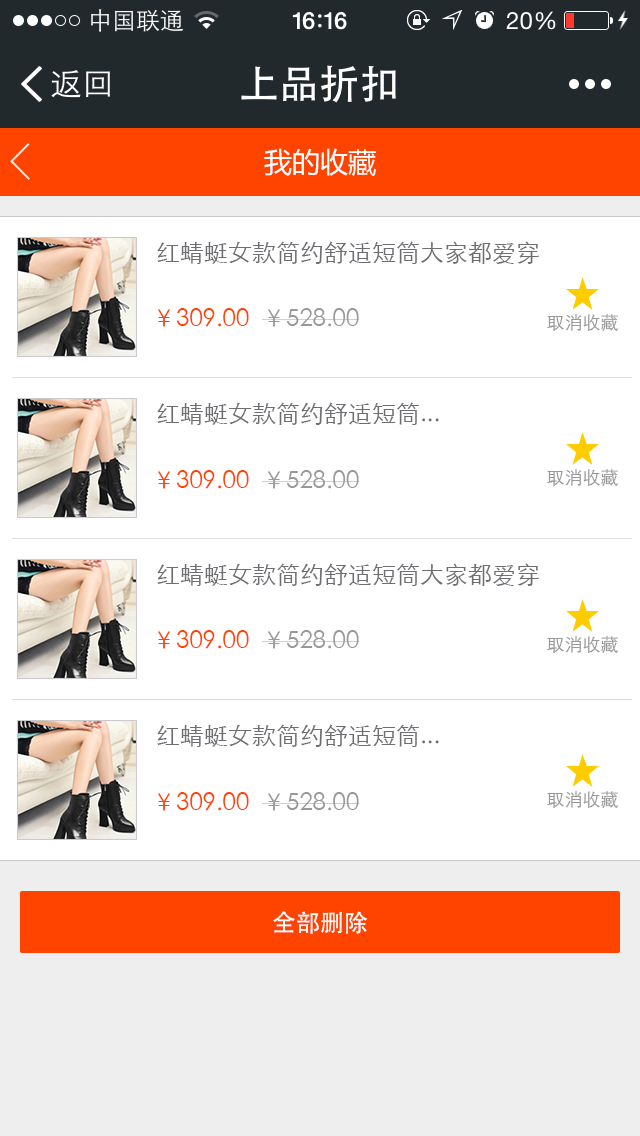
<style>
.page{position:relative;width:640px;height:1136px;background:#ffffff}
.page>*{position:absolute;margin:0}
.t1{font:28px "MicrosoftYaHei";color:#ffffff}
.t2{font:24px "STXihei";color:#6d6d72}
.t3{font:24px "STXihei";color:#ff4400}
.t4{font:24px "STXihei";color:#999999}
.t5{font:18px "STXihei";color:#999999}
.t6{font:24px "STHeiti";color:#ffffff}
</style>
<div class="page">
<p class="t1" style="left:264px;top:148px;width:112px;height:28px">我的收藏</p>
<p class="t2" style="left:157px;top:241px;width:382px;height:23px">红蜻蜓女款简约舒适短筒大家都爱穿</p>
<p class="t3" style="left:157px;top:308px;width:92px;height:19px">￥309.00</p>
<p class="t4" style="left:262px;top:308px;width:98px;height:19px">￥528.00</p>
<p class="t5" style="left:547px;top:314px;width:71px;height:17px">取消收藏</p>
<p class="t2" style="left:157px;top:402px;width:282px;height:23px">红蜻蜓女款简约舒适短筒...</p>
<p class="t3" style="left:157px;top:470px;width:92px;height:19px">￥309.00</p>
<p class="t4" style="left:262px;top:470px;width:98px;height:19px">￥528.00</p>
<p class="t5" style="left:547px;top:469px;width:71px;height:17px">取消收藏</p>
<p class="t2" style="left:157px;top:563px;width:382px;height:23px">红蜻蜓女款简约舒适短筒大家都爱穿</p>
<p class="t3" style="left:157px;top:630px;width:92px;height:19px">￥309.00</p>
<p class="t4" style="left:262px;top:630px;width:98px;height:19px">￥528.00</p>
<p class="t5" style="left:547px;top:636px;width:71px;height:17px">取消收藏</p>
<p class="t2" style="left:157px;top:724px;width:282px;height:23px">红蜻蜓女款简约舒适短筒...</p>
<p class="t3" style="left:157px;top:792px;width:92px;height:19px">￥309.00</p>
<p class="t4" style="left:262px;top:792px;width:98px;height:19px">￥528.00</p>
<p class="t5" style="left:547px;top:791px;width:71px;height:17px">取消收藏</p>
<p class="t6" style="left:273px;top:911px;width:95px;height:23px">全部删除</p>
</div>
